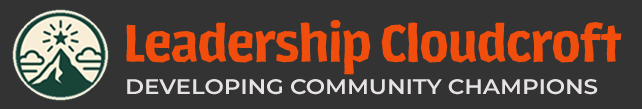
<style>
.page{position:relative;width:642px;height:109px;background:#333333}
.page>*{position:absolute;margin:0}
.t1{font:50px "LosLanaNiuPro-Bold";letter-spacing:-0.025em;color:#f14e0e}
.t2{font:21px "Montserrat-SemiBold";letter-spacing:-0.005em;color:#e7e3e3;scale:1.1 1}
</style>
<div class="page">
<p class="t1" style="left:126px;top:20px;width:496px;height:55px">Leadership Cloudcroft</p>
<p class="t2" style="left:127px;top:79px;width:471px;height:16px">DEVELOPING COMMUNITY CHAMPIONS</p>
</div>
